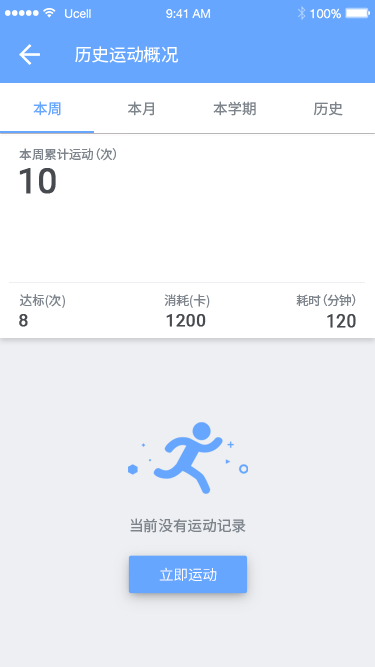
<style>
.page{position:relative;width:375px;height:667px;background:#edeff2}
.page>*{position:absolute;margin:0}
.t1{font:17.4px "NotoSansHans-Regular";color:#ffffff}
.t2{font:14.6px "NotoSansHans-Regular";color:#66a6ff}
.t3{font:14.5px "NotoSansHans-Regular";color:#7e848c}
.t4{font:12.5px "NotoSansHans-Regular";color:#7e848c}
.t5{font:34.9px "Roboto-Regular";color:#474a4f;font-weight:bold}
.t6{font:17.5px "Roboto-Regular";color:#474a4f;font-weight:bold}
.t7{font:17.4px "Roboto-Regular";color:#474a4f;font-weight:bold}
.t8{font:14.6px "NotoSansHans-Regular";color:#7e848c}
.t9{font:14.6px "NotoSansHans-Regular";letter-spacing:0.01em;color:#ffffff;text-transform:uppercase}
</style>
<div class="page">
<p class="t1" style="left:75px;top:46px;width:103px;height:17px">历史运动概况</p>
<p class="t2" style="left:33px;top:101px;width:28px;height:15px">本周</p>
<p class="t3" style="left:128px;top:101px;width:26px;height:15px">本月</p>
<p class="t3" style="left:213px;top:101px;width:43px;height:15px">本学期</p>
<p class="t3" style="left:313px;top:101px;width:30px;height:15px">历史</p>
<p class="t4" style="left:19px;top:148px;width:97px;height:13px">本周累计运动（次）</p>
<p class="t5" style="left:19px;top:168px;width:37px;height:26px">10</p>
<p class="t4" style="left:19px;top:294px;width:46px;height:14px">达标(次)</p>
<p class="t4" style="left:164px;top:294px;width:46px;height:14px">消耗(卡)</p>
<p class="t4" style="left:296px;top:294px;width:60px;height:12px">耗时（分钟）</p>
<p class="t6" style="left:19px;top:314px;width:9px;height:13px">8</p>
<p class="t7" style="left:166px;top:314px;width:40px;height:13px">1200</p>
<p class="t6" style="left:327px;top:314px;width:29px;height:14px">120</p>
<p class="t8" style="left:130px;top:518px;width:116px;height:15px">当前没有运动记录</p>
<p class="t9" style="left:159px;top:567px;width:58px;height:15px">立即运动</p>
</div>
